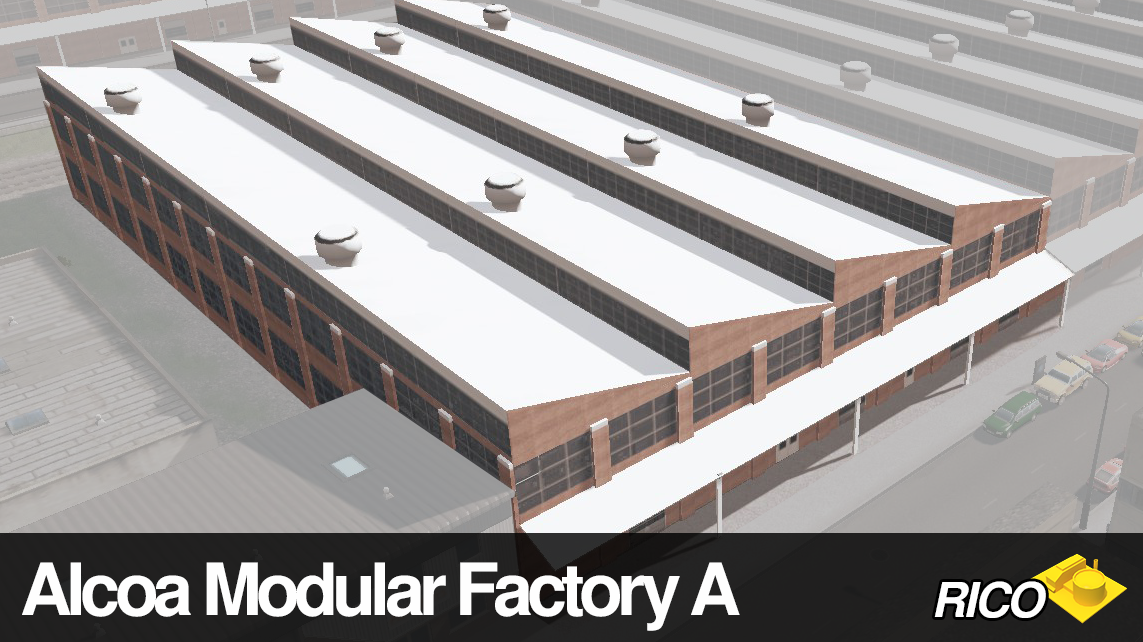
<style>
.page{position:relative;width:1143px;height:642px}
.page>*{position:absolute;margin:0}
.t1{font:72px "NimbusSanL-Bold";letter-spacing:-0.08em;color:#fefefe}
.t2{font:48px "NimbusSanL-BoldItal";letter-spacing:-0.05em;color:#fefefe}
</style>
<div class="page">
<p class="t1" style="left:22px;top:562px;width:718px;height:69px">Alcoa Modular Factory A</p>
<p class="t2" style="left:934px;top:581px;width:112px;height:37px">RICO</p>
</div>
